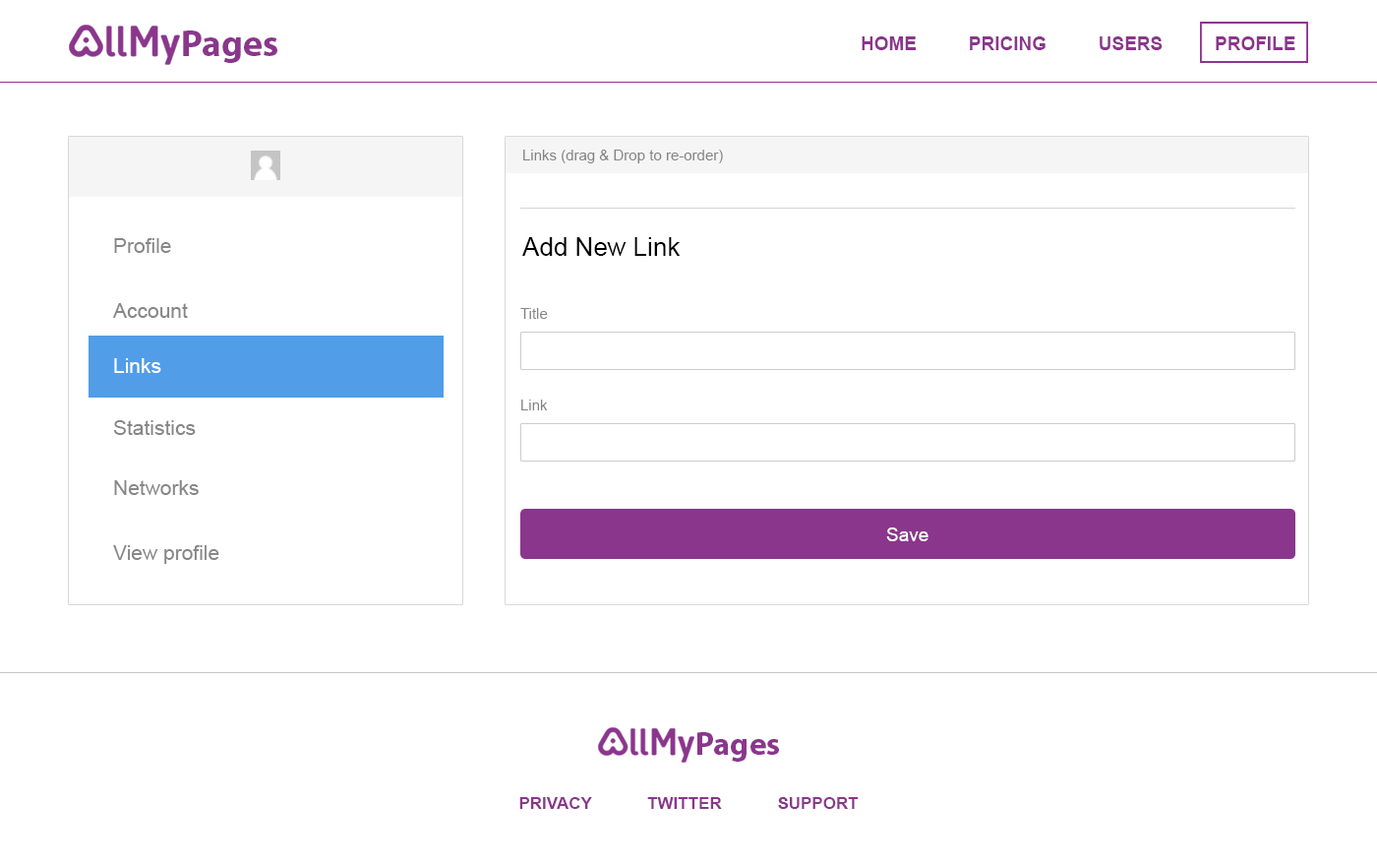
<style>
.page{position:relative;width:1377px;height:866px;background:#ffffff}
.page>*{position:absolute;margin:0}
.t1{font:37.2px "MyriadPro-Bold";color:#8a368c}
.t2{font:18.7px "Arial-BoldMT";color:#8a368c}
.t3{font:14.8px "ArialMT";color:#848484}
.t4{font:20.7px "ArialMT";color:#878787}
.t5{font:25.6px "ArialMT";color:#000000}
.t6{font:20.7px "ArialMT";color:#ffffff}
.t7{font:18.7px "ArialMT";color:#ffffff}
.t8{font:32.6px "MyriadPro-Bold";color:#8a368c}
.t9{font:16.7px "Arial-BoldMT";color:#8a368c}
</style>
<div class="page">
<p class="t1" style="left:183px;top:30px;width:94px;height:33px">Pages</p>
<p class="t2" style="left:862px;top:36px;width:434px;height:14px">HOME          PRICING          USERS          PROFILE</p>
<p class="t3" style="left:523px;top:150px;width:200px;height:13px">Links (drag &amp; Drop to re-order)</p>
<p class="t4" style="left:114px;top:238px;width:57px;height:15px">Profile</p>
<p class="t5" style="left:522px;top:237px;width:159px;height:19px">Add New Link</p>
<p class="t4" style="left:113px;top:303px;width:75px;height:15px">Account</p>
<p class="t3" style="left:520px;top:308px;width:28px;height:11px">Title</p>
<p class="t6" style="left:114px;top:358px;width:47px;height:15px">Links</p>
<p class="t3" style="left:521px;top:399px;width:27px;height:11px">Link</p>
<p class="t4" style="left:113px;top:420px;width:83px;height:15px">Statistics</p>
<p class="t4" style="left:114px;top:480px;width:85px;height:15px">Networks</p>
<p class="t7" style="left:886px;top:527px;width:43px;height:14px">Save</p>
<p class="t4" style="left:113px;top:545px;width:106px;height:19px">View profile</p>
<p class="t8" style="left:698px;top:732px;width:81px;height:29px">Pages</p>
<p class="t9" style="left:519px;top:797px;width:340px;height:12px">PRIVACY            TWITTER            SUPPORT</p>
</div>
